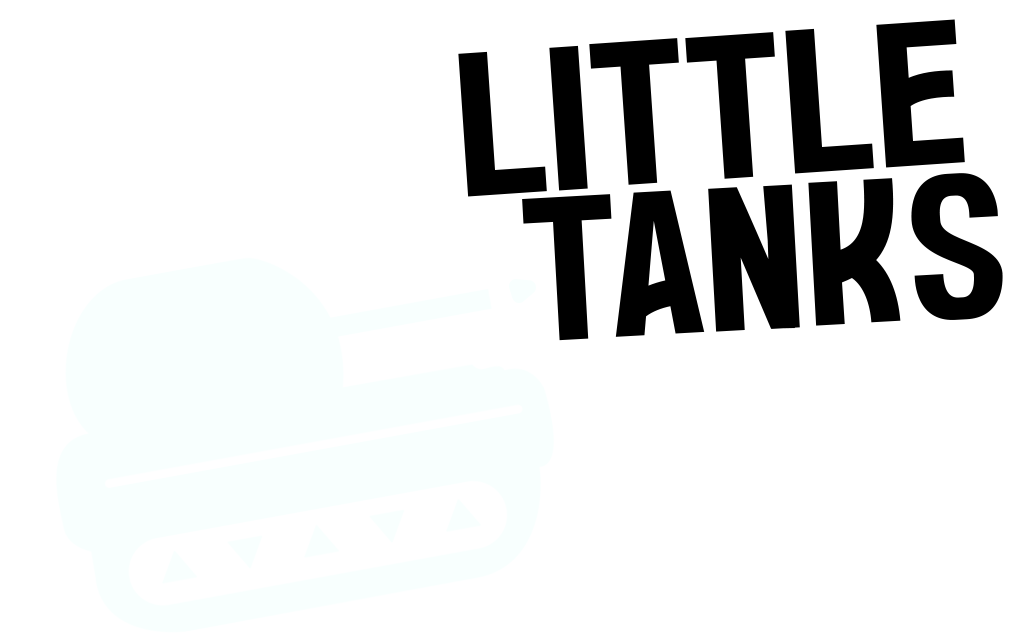
<style>
.page{position:relative;width:1026px;height:643px;background:#ffffff}
.page>*{position:absolute;margin:0}
.t1{font:204.2px "KanopiBrazil-Regular";color:#000000}
</style>
<div class="page">
<p class="t1" style="left:458px;top:19px;width:507px;height:178px;rotate:-4deg">LITTLE</p>
<p class="t1" style="left:522px;top:173px;width:481px;height:168px;rotate:-3deg">TAnks</p>
</div>
